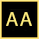
<style>
.page{position:relative;width:39px;height:39px;background:#000000}
.page>*{position:absolute;margin:0}
.t1{font:20.8px "MyriadPro-Regular";letter-spacing:0.1em;color:#ffed7f}
</style>
<div class="page">
<p class="t1" style="left:6px;top:12px;width:26px;height:14px">AA</p>
</div>
